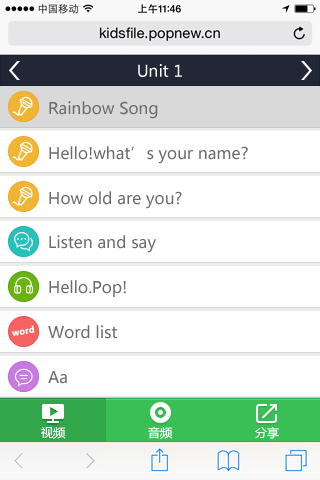
<style>
.page{position:relative;width:320px;height:480px;background:#ffffff}
.page>*{position:absolute;margin:0}
.t1{font:16px "MicrosoftYaHei";color:#ffffff}
.t2{font:16px "MicrosoftYaHei";color:#6b6b6b}
.t3{font:8.3px "MicrosoftYaHei-Bold";color:#ffffff;font-weight:bold}
.t4{font:12px "MicrosoftYaHei";color:#ffffff}
</style>
<div class="page">
<p class="t1" style="left:138px;top:64px;width:44px;height:13px">Unit 1</p>
<p class="t2" style="left:49px;top:101px;width:109px;height:18px">Rainbow Song</p>
<p class="t2" style="left:49px;top:146px;width:199px;height:18px">Hello!what’s your name?</p>
<p class="t2" style="left:49px;top:191px;width:133px;height:18px">How old are you?</p>
<p class="t2" style="left:49px;top:235px;width:107px;height:18px">Listen and say</p>
<p class="t2" style="left:49px;top:280px;width:77px;height:17px">Hello.Pop!</p>
<p class="t3" style="left:11px;top:325px;width:24px;height:11px;rotate:-10deg">word</p>
<p class="t2" style="left:48px;top:325px;width:69px;height:14px">Word list</p>
<p class="t2" style="left:48px;top:371px;width:19px;height:13px">Aa</p>
<p class="t4" style="left:41px;top:427px;width:25px;height:12px">视频</p>
<p class="t4" style="left:148px;top:426px;width:25px;height:13px">音频</p>
<p class="t4" style="left:255px;top:427px;width:24px;height:12px">分享</p>
</div>
